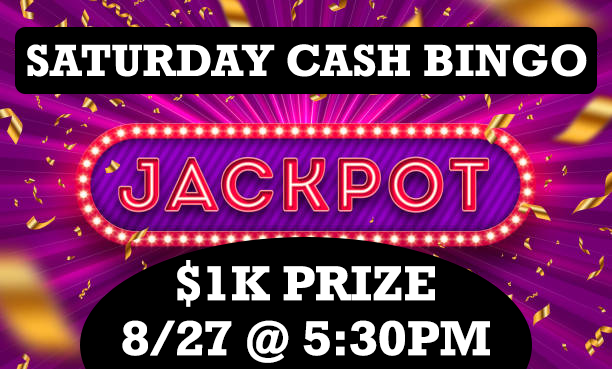
<style>
.page{position:relative;width:612px;height:369px;background:#000000}
.page>*{position:absolute;margin:0}
.t1{font:45.8px "Rockwell-Bold";color:#ffffff}
</style>
<div class="page">
<p class="t1" style="left:27px;top:44px;width:560px;height:33px">SATURDAY CASH BINGO</p>
<p class="t1" style="left:122px;top:260px;width:368px;height:103px;text-align:center">$1K PRIZE<br>8/27 @ 5:30PM</p>
</div>
